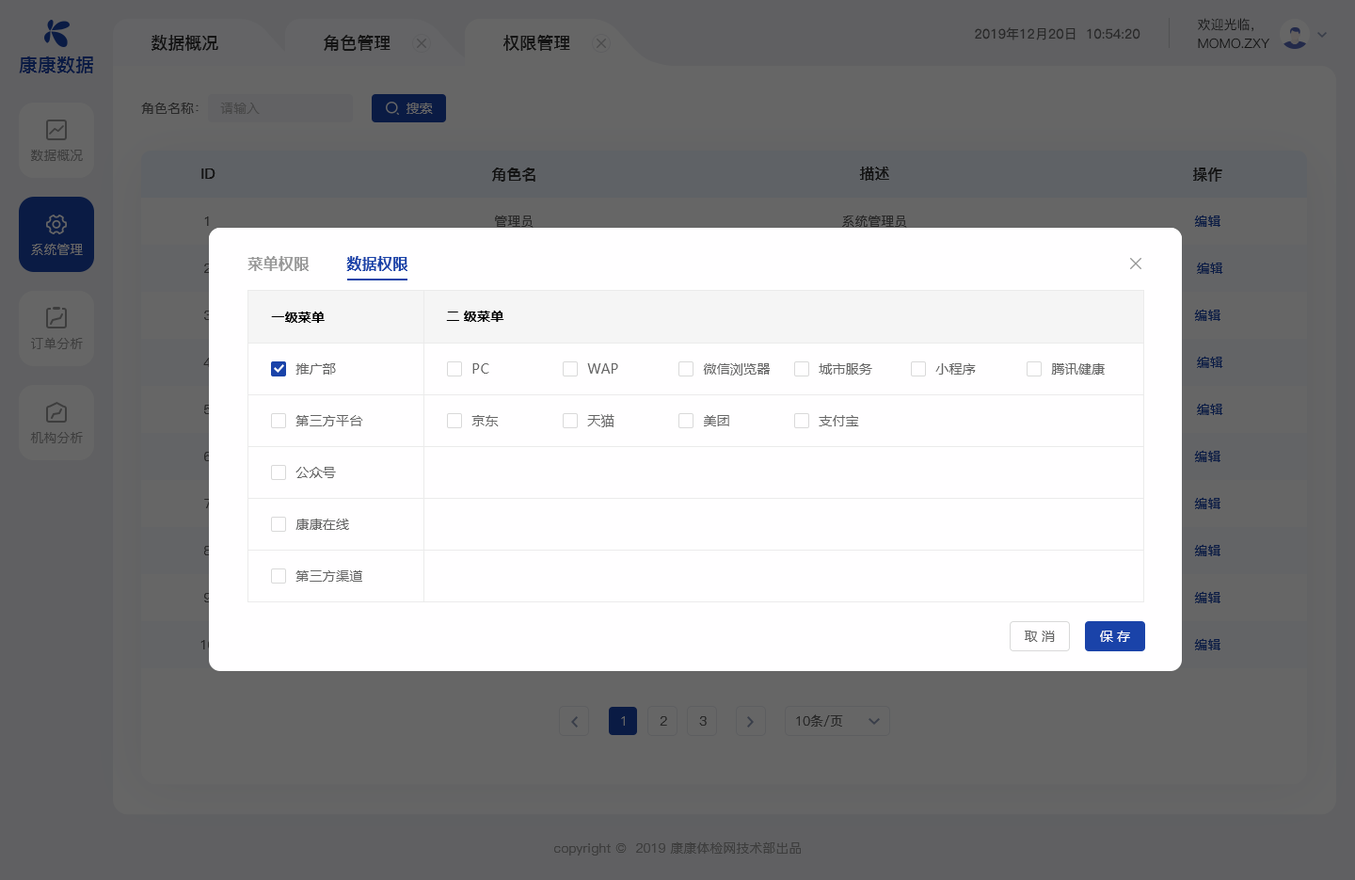
<style>
.page{position:relative;width:1355px;height:880px;background:#fffeff}
.page>*{position:absolute;margin:0}
.t1{font:13.2px "PingFang-SC-Medium";color:#141414;text-transform:uppercase}
.t2{font:13.2px "PingFang-SC-Regular";color:#292929}
.t3{font:16.9px "PingFang-SC-Bold";color:#141414;text-transform:uppercase}
.t4{font:18.8px "PingFangSC-Medium";color:#0a1b44;text-transform:uppercase}
.t5{font:13.2px "PingFang-SC-Medium";color:#292929}
.t6{font:13.2px "PingFang-SC-Medium";color:#484848}
.t7{font:13.2px "MicrosoftYaHei";letter-spacing:0.02em;color:#666666}
.t8{font:13.2px "PingFang-SC-Medium";color:#3d3d3d;text-transform:uppercase}
.t9{font:15.1px "PingFang-SC-Bold";color:#141414;text-transform:uppercase}
.t10{font:13.2px "PingFang-SC-Medium";color:#292929;text-transform:uppercase}
.t11{font:13.2px "PingFang-SC-Medium";color:#0a1b44;text-transform:uppercase}
.t12{font:13.2px "PingFang-SC-Medium";color:#666666;text-transform:uppercase}
.t13{font:15.1px "MicrosoftYaHei-Bold";letter-spacing:0.02em;color:#999999}
.t14{font:15.1px "MicrosoftYaHei-Bold";letter-spacing:0.02em;color:#1a43a9}
.t15{font:13.2px "MicrosoftYaHei-Bold";letter-spacing:0.02em;color:#000000}
.t16{font:13.2px "MicrosoftYaHei";letter-spacing:0.02em;color:#ffffff}
.t17{font:13.2px "PingFang-SC-Medium";color:#3d3d3d}
</style>
<div class="page">
<p class="t1" style="left:1198px;top:18px;width:56px;height:14px">欢迎光临，</p>
<p class="t2" style="left:975px;top:27px;width:166px;height:13px">2019年12月20日  10:54:20</p>
<p class="t3" style="left:152px;top:35px;width:66px;height:16px">数据概况</p>
<p class="t3" style="left:324px;top:35px;width:67px;height:16px">角色管理</p>
<p class="t3" style="left:503px;top:35px;width:67px;height:16px">权限管理</p>
<p class="t1" style="left:1198px;top:38px;width:72px;height:11px">momo.zxy</p>
<p class="t4" style="left:19px;top:56px;width:74px;height:17px">康康数据</p>
<p class="t5" style="left:141px;top:102px;width:58px;height:12px">角色名称：</p>
<p class="t6" style="left:220px;top:103px;width:40px;height:11px">请输入</p>
<p class="t7" style="left:407px;top:103px;width:26px;height:11px">搜索</p>
<p class="t8" style="left:31px;top:150px;width:52px;height:11px">数据概况</p>
<p class="t9" style="left:201px;top:168px;width:15px;height:11px">ID</p>
<p class="t9" style="left:492px;top:168px;width:43px;height:14px">角色名</p>
<p class="t9" style="left:859px;top:167px;width:30px;height:14px">描述</p>
<p class="t9" style="left:1193px;top:168px;width:29px;height:14px">操作</p>
<p class="t10" style="left:204px;top:216px;width:5px;height:10px">1</p>
<p class="t10" style="left:495px;top:215px;width:39px;height:13px">管理员</p>
<p class="t10" style="left:842px;top:215px;width:65px;height:13px">系统管理员</p>
<p class="t11" style="left:1194px;top:215px;width:27px;height:12px">编辑</p>
<p class="t12" style="left:31px;top:243px;width:52px;height:12px">系统管理</p>
<p class="t13" style="left:248px;top:256px;width:61px;height:15px">菜单权限</p>
<p class="t13" style="left:248px;top:256px;width:61px;height:15px">菜单权限</p>
<p class="t14" style="left:346px;top:256px;width:61px;height:15px">数据权限</p>
<p class="t14" style="left:346px;top:256px;width:61px;height:15px">数据权限</p>
<p class="t11" style="left:1197px;top:262px;width:26px;height:12px">编辑</p>
<p class="t15" style="left:271px;top:311px;width:54px;height:12px">一级菜单</p>
<p class="t15" style="left:271px;top:311px;width:54px;height:12px">一级菜单</p>
<p class="t15" style="left:446px;top:311px;width:58px;height:11px">二 级菜单</p>
<p class="t15" style="left:446px;top:311px;width:58px;height:11px">二 级菜单</p>
<p class="t11" style="left:1194px;top:309px;width:27px;height:12px">编辑</p>
<p class="t8" style="left:31px;top:337px;width:52px;height:12px">订单分析</p>
<p class="t7" style="left:296px;top:363px;width:40px;height:12px">推广部</p>
<p class="t7" style="left:472px;top:363px;width:17px;height:11px">PC</p>
<p class="t7" style="left:587px;top:363px;width:31px;height:11px">WAP</p>
<p class="t7" style="left:703px;top:363px;width:67px;height:12px">微信浏览器</p>
<p class="t7" style="left:819px;top:363px;width:53px;height:12px">城市服务</p>
<p class="t7" style="left:935px;top:363px;width:41px;height:12px">小程序</p>
<p class="t7" style="left:1051px;top:363px;width:54px;height:12px">腾讯健康</p>
<p class="t11" style="left:1197px;top:356px;width:26px;height:12px">编辑</p>
<p class="t11" style="left:1197px;top:403px;width:26px;height:12px">编辑</p>
<p class="t7" style="left:296px;top:415px;width:67px;height:11px">第三方平台</p>
<p class="t7" style="left:471px;top:415px;width:28px;height:11px">京东</p>
<p class="t7" style="left:587px;top:414px;width:28px;height:13px">天猫</p>
<p class="t7" style="left:704px;top:415px;width:25px;height:11px">美团</p>
<p class="t7" style="left:819px;top:415px;width:40px;height:11px">支付宝</p>
<p class="t8" style="left:30px;top:432px;width:53px;height:11px">机构分析</p>
<p class="t11" style="left:1194px;top:450px;width:27px;height:12px">编辑</p>
<p class="t7" style="left:296px;top:467px;width:40px;height:11px">公众号</p>
<p class="t11" style="left:1194px;top:497px;width:27px;height:12px">编辑</p>
<p class="t7" style="left:296px;top:519px;width:53px;height:11px">康康在线</p>
<p class="t11" style="left:1194px;top:544px;width:27px;height:12px">编辑</p>
<p class="t7" style="left:296px;top:570px;width:66px;height:12px">第三方渠道</p>
<p class="t11" style="left:1194px;top:591px;width:27px;height:12px">编辑</p>
<p class="t7" style="left:1025px;top:631px;width:30px;height:11px">取 消</p>
<p class="t16" style="left:1100px;top:631px;width:30px;height:11px">保 存</p>
<p class="t11" style="left:1194px;top:638px;width:27px;height:12px">编辑</p>
<p class="t12" style="left:621px;top:716px;width:4px;height:10px">1</p>
<p class="t10" style="left:660px;top:716px;width:7px;height:10px">2</p>
<p class="t10" style="left:699px;top:716px;width:8px;height:10px">3</p>
<p class="t10" style="left:796px;top:714px;width:47px;height:13px">10条/页</p>
<p class="t17" style="left:554px;top:841px;width:247px;height:14px">copyright ©  2019 康康体检网技术部出品</p>
</div>
